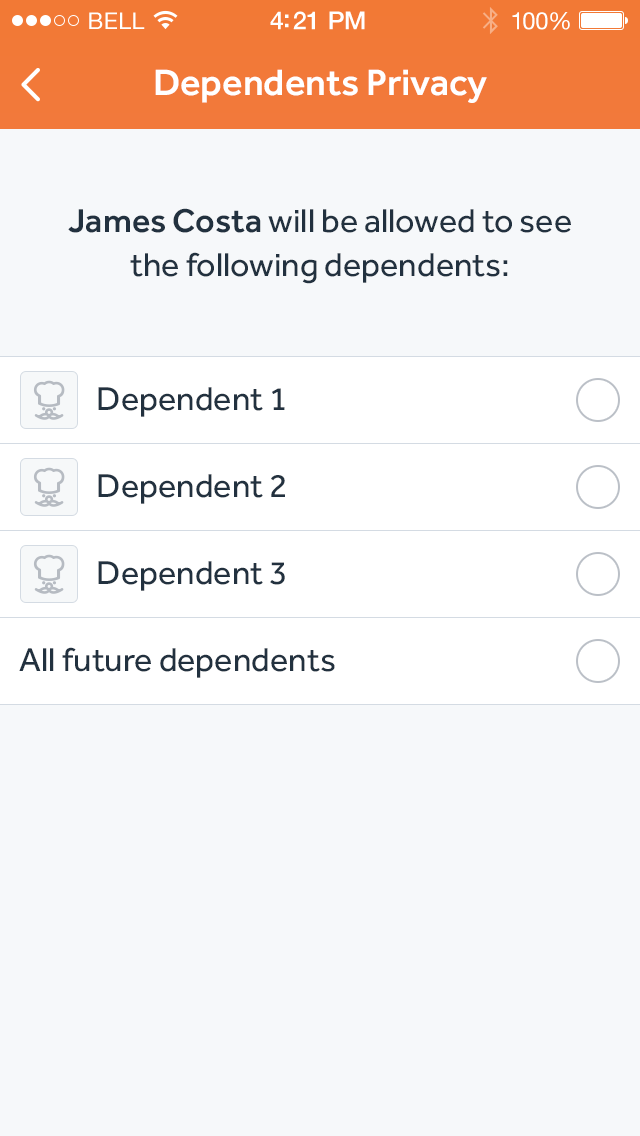
<style>
.page{position:relative;width:640px;height:1136px;background:#f6f8fa}
.page>*{position:absolute;margin:0}
.t1{font:23px "HelveticaNeue";letter-spacing:0.02em;color:#ffffff}
.t2{font:25px "HelveticaNeue-Medium";letter-spacing:-0.02em;color:#ffffff}
.t3{font:24px "HelveticaNeue";letter-spacing:-0.02em;color:#ffffff}
.t4{font:38px "Effra-Medium";color:#ffffff}
.t5{font:34px/44px "Effra-Regular";color:#22313f}
.t6{font:34px/44px "Effra-Medium";color:#22313f}
.t7{font:34px "Effra-Regular";color:#22313f}
</style>
<div class="page">
<p class="t1" style="left:89px;top:12px;width:56px;height:17px">BELL</p>
<p class="t2" style="left:270px;top:11px;width:95px;height:19px">4:21 PM</p>
<p class="t3" style="left:512px;top:12px;width:58px;height:18px">100%</p>
<p class="t4" style="left:155px;top:69px;width:332px;height:34px">Dependents Privacy</p>
<p class="t5" style="left:68px;top:208px;width:503px;height:76px;text-align:center"><span class="t6">James Costa</span> will be allowed to see <br>the following dependents:</p>
<p class="t7" style="left:98px;top:387px;width:187px;height:30px">Dependent 1</p>
<p class="t7" style="left:98px;top:474px;width:187px;height:30px">Dependent 2</p>
<p class="t7" style="left:98px;top:561px;width:187px;height:30px">Dependent 3</p>
<p class="t7" style="left:19px;top:647px;width:316px;height:31px">All future dependents</p>
</div>
